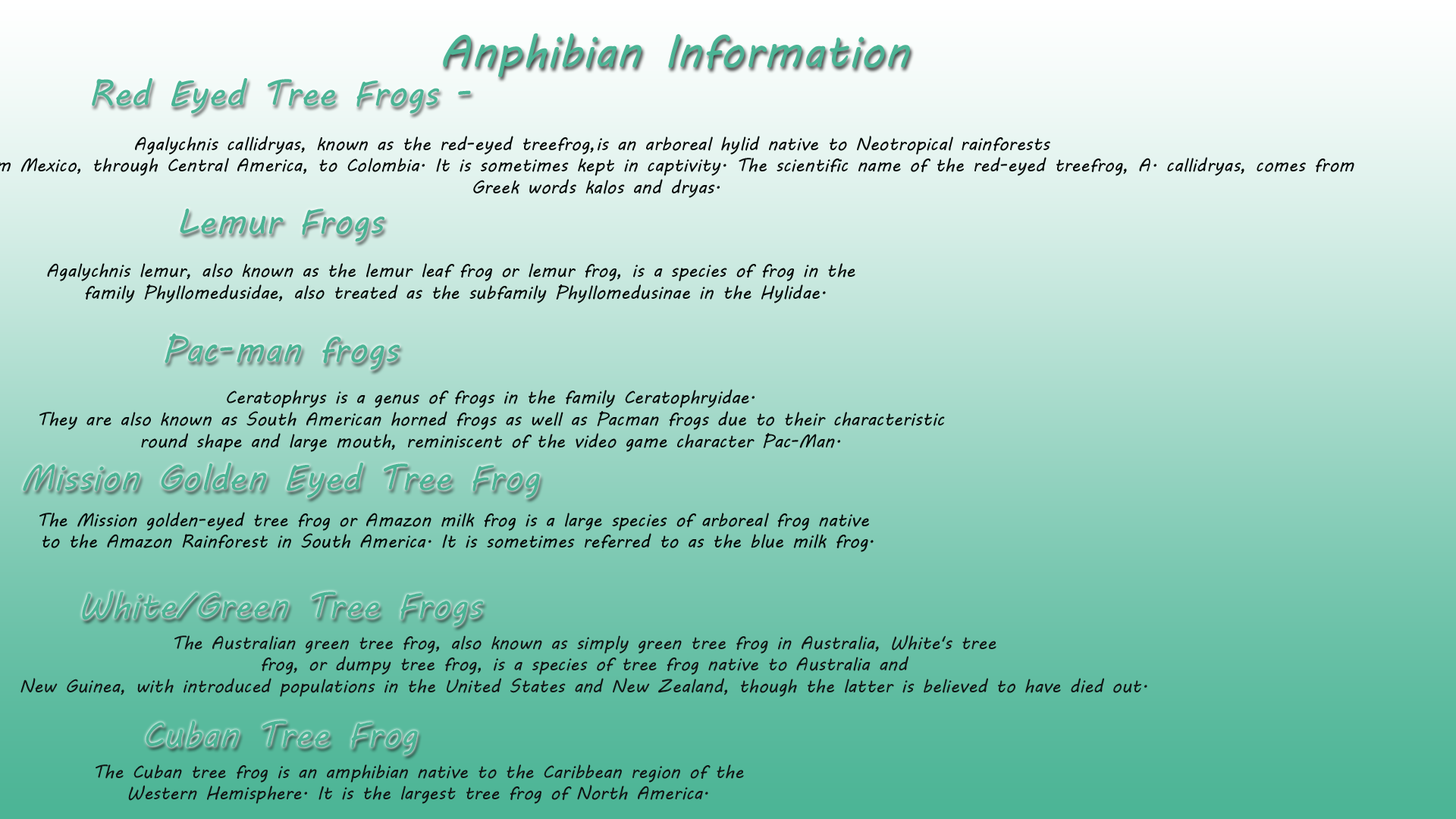
<style>
.page{position:relative;width:1456px;height:819px}
.page>*{position:absolute;margin:0}
.t1{font:45.5px "MVBoli";color:#4bb495}
.t2{font:18.2px "MVBoli";color:#030806}
.t3{font:18.2px "MVBoli";color:#0f1413}
</style>
<div class="page">
<p class="t1" style="left:443px;top:33px;width:467px;height:44px">Anphibian Information</p>
<p class="t2" style="left:47px;top:263px;width:808px;height:40px;text-align:center">Agalychnis lemur, also known as the lemur leaf frog or lemur frog, is a species of frog in the<br> family Phyllomedusidae, also treated as the subfamily Phyllomedusinae in the Hylidae.</p>
<p class="t2" style="left:39px;top:389px;width:906px;height:63px;text-align:center">Ceratophrys is a genus of frogs in the family Ceratophryidae. <br>They are also known as South American horned frogs as well as Pacman frogs due to their characteristic <br>round shape and large mouth, reminiscent of the video game character Pac-Man.</p>
<p class="t2" style="left:39px;top:512px;width:835px;height:40px;text-align:center">The Mission golden-eyed tree frog or Amazon milk frog is a large species of arboreal frog native<br> to the Amazon Rainforest in South America. It is sometimes referred to as the blue milk frog.</p>
<p class="t3" style="left:20px;top:635px;width:1127px;height:62px;text-align:center">The Australian green tree frog, also known as simply green tree frog in Australia, White's tree <br>frog, or dumpy tree frog, is a species of tree frog native to Australia and <br>New Guinea, with introduced populations in the United States and New Zealand, though the latter is believed to have died out.</p>
<p class="t3" style="left:96px;top:764px;width:648px;height:40px;text-align:center">The Cuban tree frog is an amphibian native to the Caribbean region of the <br>Western Hemisphere. It is the largest tree frog of North America.</p>
</div>
